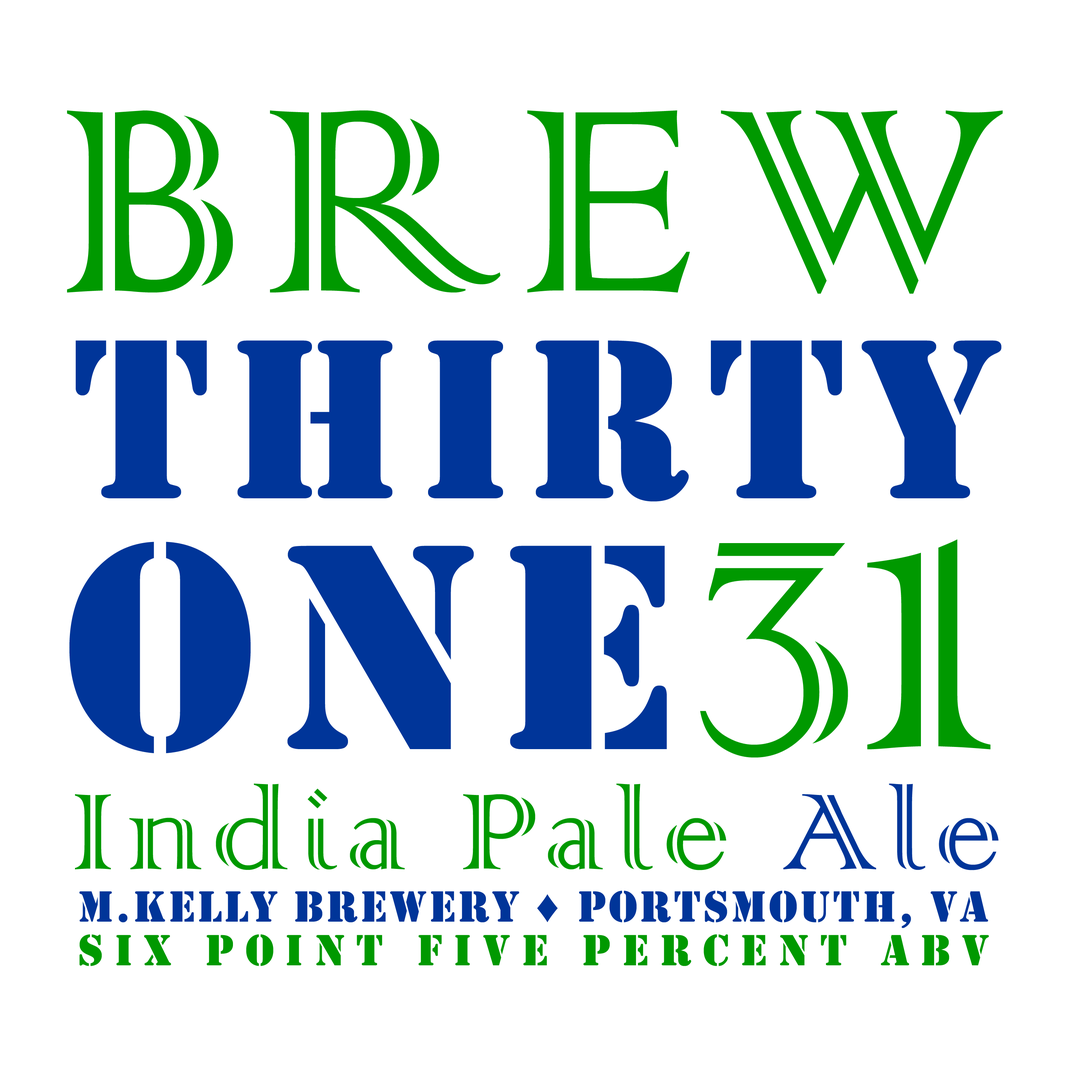
<style>
.page{position:relative;width:1092px;height:1092px;background:#ffffff}
.page>*{position:absolute;margin:0}
.t1{font:345.8px "ColonnaMT";letter-spacing:0.05em;color:#009900}
.t2{font:236.6px "Stencil";letter-spacing:0.06em;color:#003599}
.t3{font:304.8px "Stencil";letter-spacing:0.06em;color:#003599}
.t4{font:388.3px "ColonnaMT";letter-spacing:0.06em;color:#009900}
.t5{font:529.3px "ColonnaMT";letter-spacing:0.06em;color:#009900}
.t6{font:142.6px "ColonnaMT";letter-spacing:0.06em;color:#009900}
.t7{font:142.6px "ColonnaMT";letter-spacing:0.06em;color:#003599}
.t8{font:45.5px "Stencil";letter-spacing:0.05em;color:#003599}
.t9{font:45.5px "ArialMT";letter-spacing:0.05em;color:#003599}
.t10{font:45.5px "Stencil";letter-spacing:0.245em;color:#009900}
</style>
<div class="page">
<p class="t1" style="left:67px;top:110px;width:936px;height:184px">BREW</p>
<p class="t2" style="left:76px;top:340px;width:925px;height:162px">Thirty</p>
<p class="t3" style="left:69px;top:542px;width:598px;height:211px">ONE</p>
<p class="t4" style="left:700px;top:543px;width:148px;height:214px">3</p>
<p class="t5" style="left:867px;top:539px;width:123px;height:210px">1</p>
<p class="t6" style="left:75px;top:783px;width:923px;height:87px">India Pale<span class="t7"> Ale</span></p>
<p class="t8" style="left:79px;top:891px;width:909px;height:37px">M.Kelly BREWERY    PORTSMOUTH, VA</p>
<p class="t9" style="left:537px;top:894px;width:21px;height:28px">♦</p>
<p class="t10" style="left:79px;top:934px;width:910px;height:32px">SIX POINT FIVE PERCENT ABV</p>
</div>
